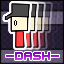
<style>
.page{position:relative;width:64px;height:64px}
.page>*{position:absolute;margin:0}
.t1{font:8px "M41_LOVEBIT";color:#8f15bd}
</style>
<div class="page">
<p class="t1" style="left:6px;top:52px;width:53px;height:8px">-DASH-</p>
</div>
